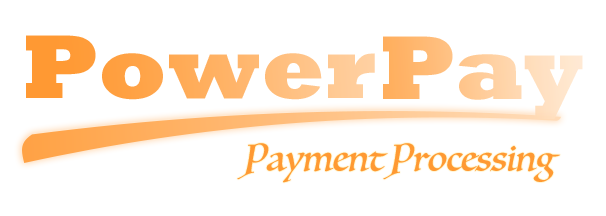
<style>
.page{position:relative;width:606px;height:216px;background:#ffffff}
.page>*{position:absolute;margin:0}
.t1{font:92px "Rockwell-ExtraBold"}
.t2{font:36px "Luminari-Regular";color:#ff9933;font-style:italic;scale:0.91 1}
</style>
<div class="page">
<p class="t1" style="left:26px;top:35px;width:349px;height:65px">Power</p>
<p class="t1" style="left:383px;top:36px;width:200px;height:83px">Pay</p>
<p class="t2" style="left:237px;top:143px;width:324px;height:40px">Payment Processing</p>
</div>
